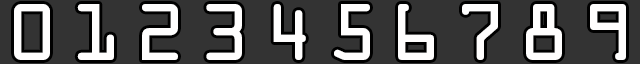
<style>
.page{position:relative;width:640px;height:64px;background:#333333}
.page>*{position:absolute;margin:0}
.t1{font:72px "OCRAStd";color:#fffefe}
</style>
<div class="page">
<p class="t1" style="left:14px;top:4px;width:36px;height:56px">0</p>
<p class="t1" style="left:77px;top:4px;width:37px;height:56px">1</p>
<p class="t1" style="left:142px;top:4px;width:36px;height:56px">2</p>
<p class="t1" style="left:206px;top:4px;width:36px;height:56px">3</p>
<p class="t1" style="left:273px;top:4px;width:33px;height:56px">4</p>
<p class="t1" style="left:334px;top:4px;width:36px;height:56px">5</p>
<p class="t1" style="left:398px;top:4px;width:36px;height:56px">6</p>
<p class="t1" style="left:462px;top:4px;width:36px;height:56px">7</p>
<p class="t1" style="left:526px;top:4px;width:36px;height:56px">8</p>
<p class="t1" style="left:590px;top:4px;width:36px;height:56px">9</p>
</div>
